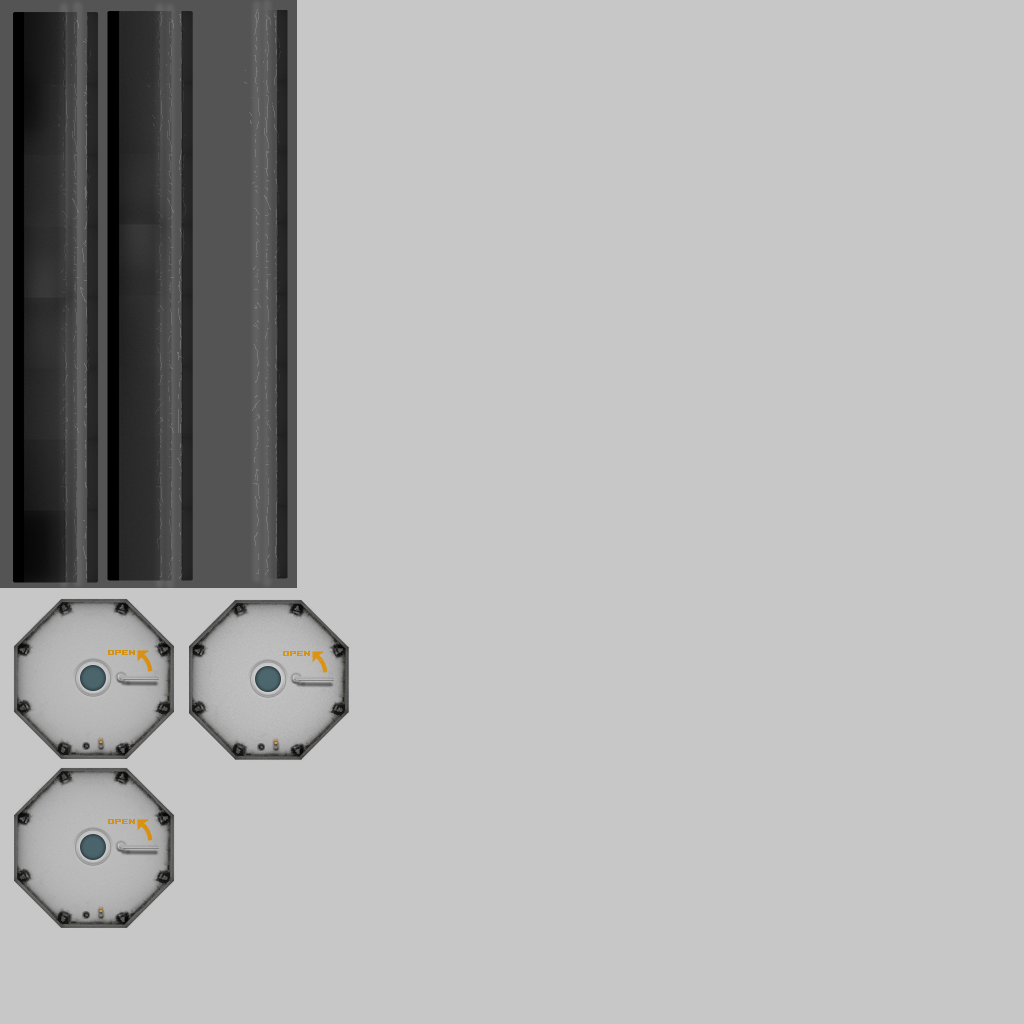
<style>
.page{position:relative;width:1024px;height:1024px;background:#c7c7c7}
.page>*{position:absolute;margin:0}
.t1{font:8px "5x5-Pixel";letter-spacing:0.01em;color:#e49e18;text-transform:uppercase;font-weight:bold}
</style>
<div class="page">
<p class="t1" style="left:108px;top:650px;width:27px;height:5px">OPEN</p>
<p class="t1" style="left:283px;top:651px;width:27px;height:5px">OPEN</p>
<p class="t1" style="left:108px;top:819px;width:27px;height:5px">OPEN</p>
</div>
